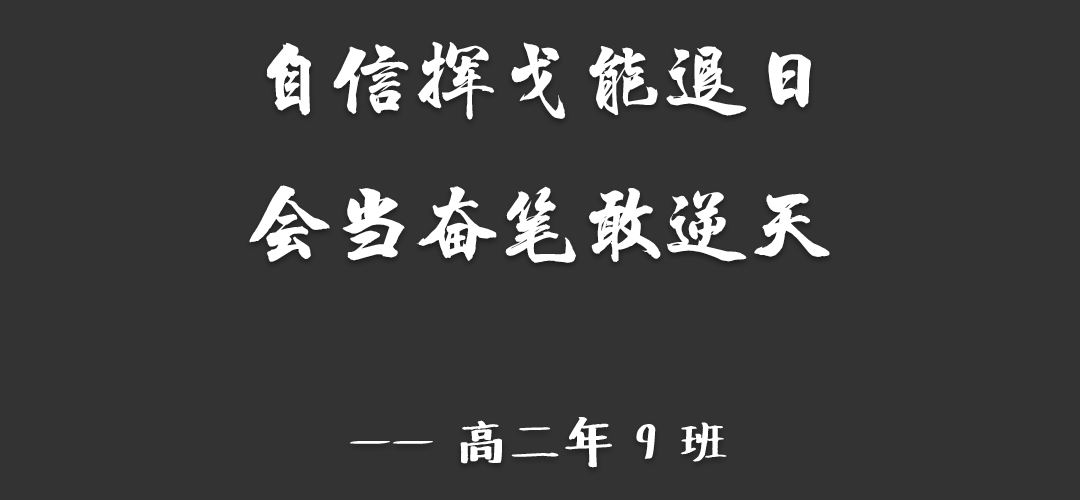
<style>
.page{position:relative;width:1080px;height:500px;background:#333333}
.page>*{position:absolute;margin:0}
.t1{font:83.3px "HYChengXingJ";color:#ffffff}
.t2{font:50px "Undefined";color:#ffffff}
</style>
<div class="page">
<p class="t1" style="left:249px;top:41px;width:581px;height:427px;text-align:center">自信挥戈能退日<br>会当奋笔敢逆天<br><span class="t2"><br>—— 高二年 9 班</span></p>
</div>
